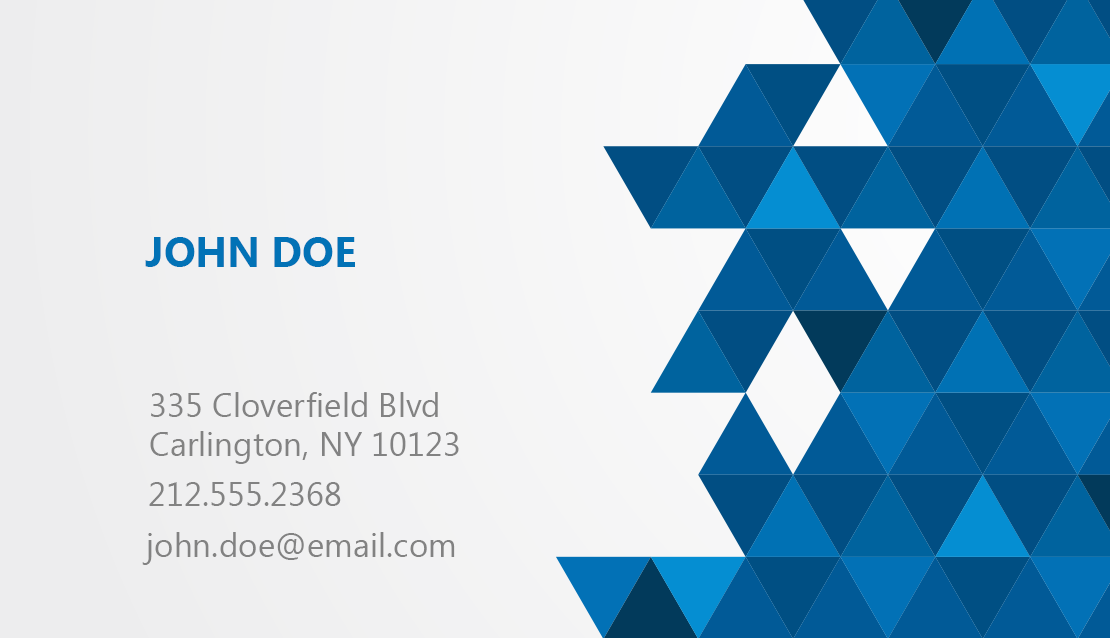
<style>
.page{position:relative;width:1110px;height:638px}
.page>*{position:absolute;margin:0}
.t1{font:41.7px "SegoeUI-Bold";color:#0272b6;text-transform:uppercase}
.t2{font:33.3px "SegoeUI";color:#828282}
</style>
<div class="page">
<p class="t1" style="left:145px;top:237px;width:210px;height:30px">JOHN DOE</p>
<p class="t2" style="left:150px;top:392px;width:309px;height:72px">335 Cloverfield Blvd<br>Carlington, NY 10123</p>
<p class="t2" style="left:149px;top:482px;width:192px;height:24px">212.555.2368</p>
<p class="t2" style="left:142px;top:532px;width:313px;height:33px">john.doe@email.com</p>
</div>
